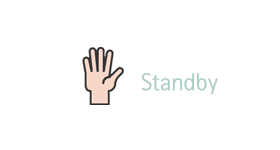
<style>
.page{position:relative;width:280px;height:150px;background:#ffffff}
.page>*{position:absolute;margin:0}
.t1{font:24px "SeN-CM";color:#acccc4}
</style>
<div class="page">
<p class="t1" style="left:141px;top:72px;width:77px;height:23px">Standby</p>
</div>
